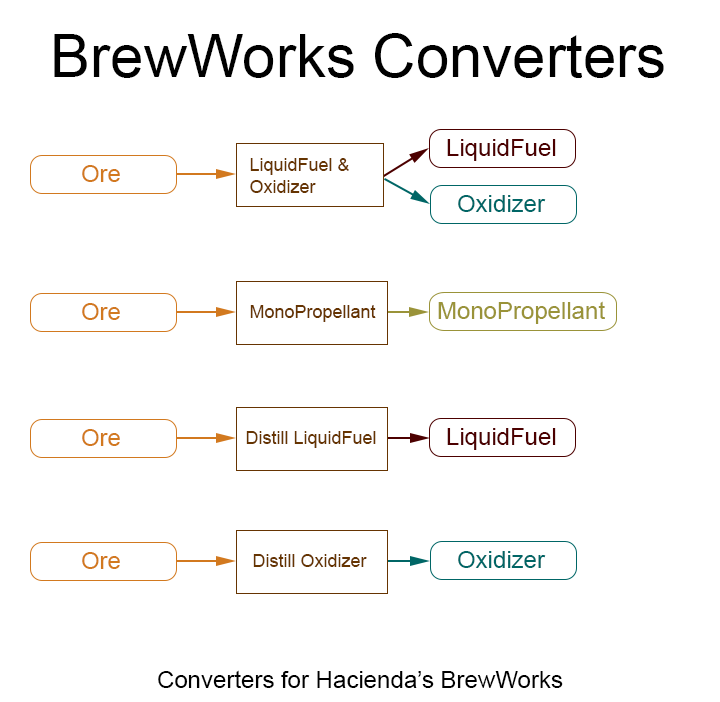
<style>
.page{position:relative;width:720px;height:702px;background:#ffffff}
.page>*{position:absolute;margin:0}
.t1{font:60px "ArialMT";color:#000000}
.t2{font:24px "ArialMT";color:#4c0000}
.t3{font:18px "ArialMT";color:#663401}
.t4{font:24px "ArialMT";color:#d2791f}
.t5{font:24px "ArialMT";color:#006666}
.t6{font:24px "ArialMT";color:#9a9339}
.t7{font:24px "ArialMT";color:#000000}
</style>
<div class="page">
<p class="t1" style="left:54px;top:33px;width:610px;height:45px">BrewWorks Converters</p>
<p class="t2" style="left:447px;top:139px;width:109px;height:22px">LiquidFuel</p>
<p class="t3" style="left:250px;top:158px;width:99px;height:35px">LiquidFuel &amp;<br>Oxidizer</p>
<p class="t4" style="left:82px;top:165px;width:38px;height:17px">Ore</p>
<p class="t5" style="left:458px;top:195px;width:88px;height:17px">Oxidizer</p>
<p class="t4" style="left:82px;top:303px;width:38px;height:17px">Ore</p>
<p class="t3" style="left:250px;top:305px;width:126px;height:17px">MonoPropellant</p>
<p class="t6" style="left:438px;top:301px;width:167px;height:23px">MonoPropellant</p>
<p class="t4" style="left:82px;top:429px;width:38px;height:17px">Ore</p>
<p class="t3" style="left:246px;top:431px;width:130px;height:17px">Distill LiquidFuel</p>
<p class="t2" style="left:447px;top:428px;width:109px;height:22px">LiquidFuel</p>
<p class="t4" style="left:82px;top:552px;width:38px;height:17px">Ore</p>
<p class="t3" style="left:253px;top:554px;width:114px;height:13px">Distill Oxidizer</p>
<p class="t5" style="left:458px;top:551px;width:88px;height:17px">Oxidizer</p>
<p class="t7" style="left:158px;top:670px;width:405px;height:18px">Converters for Hacienda’s BrewWorks</p>
</div>
